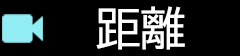
<style>
.page{position:relative;width:240px;height:56px;background:#000000}
.page>*{position:absolute;margin:0}
.t1{font:44.8px "BIZ-UDPGothic";color:#ffffff}
</style>
<div class="page">
<p class="t1" style="left:96px;top:6px;width:89px;height:44px">距離</p>
</div>
